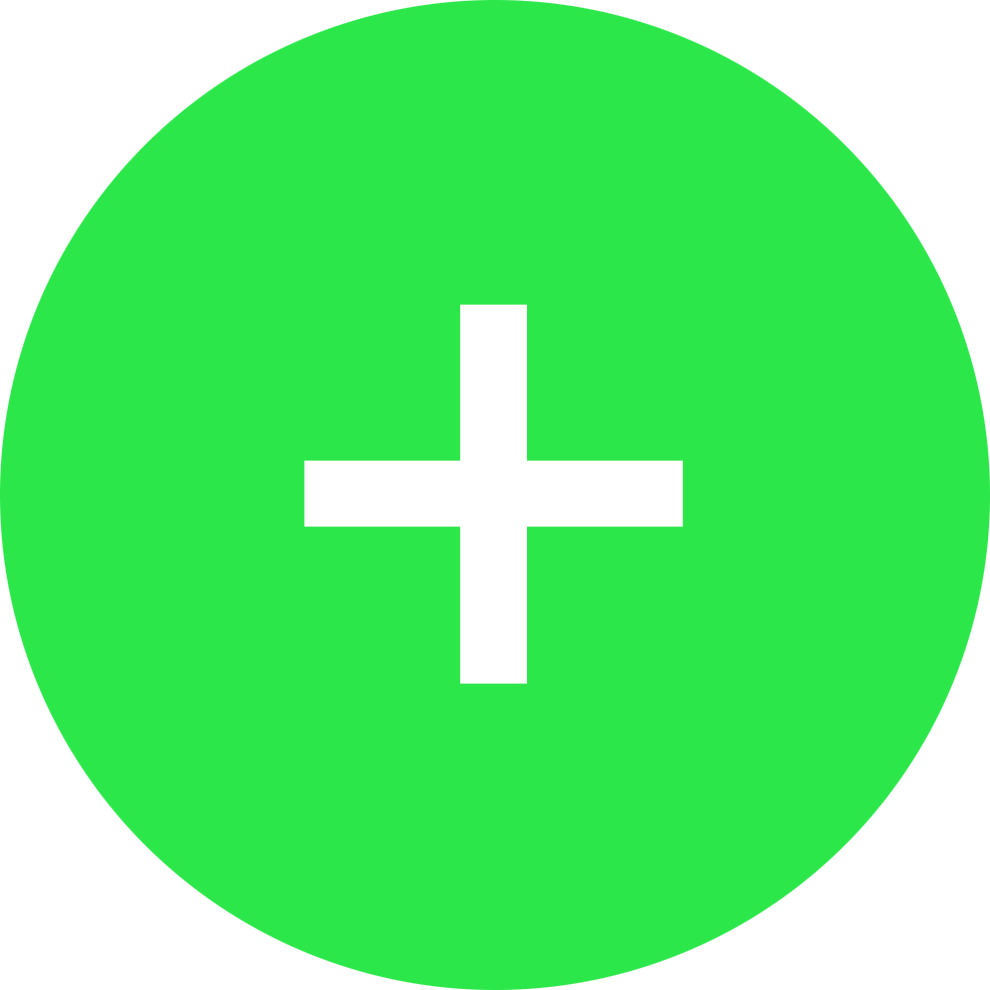
<style>
.page{position:relative;width:990px;height:990px;background:#2be74a}
.page>*{position:absolute;margin:0}
.t1{font:800px "ArialMT";color:#ffffff}
</style>
<div class="page">
<p class="t1" style="left:304px;top:304px;width:379px;height:380px">+</p>
</div>
